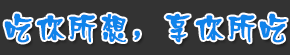
<style>
.page{position:relative;width:290px;height:55px;background:#333333}
.page>*{position:absolute;margin:0}
.t1{font:33.8px "Pop3EG-Bold-T-GB";color:#1083ea;font-weight:bold;scale:0.92 1}
</style>
<div class="page">
<p class="t1" style="left:4px;top:13px;width:283px;height:30px">吃你所想，享你所吃</p>
</div>
